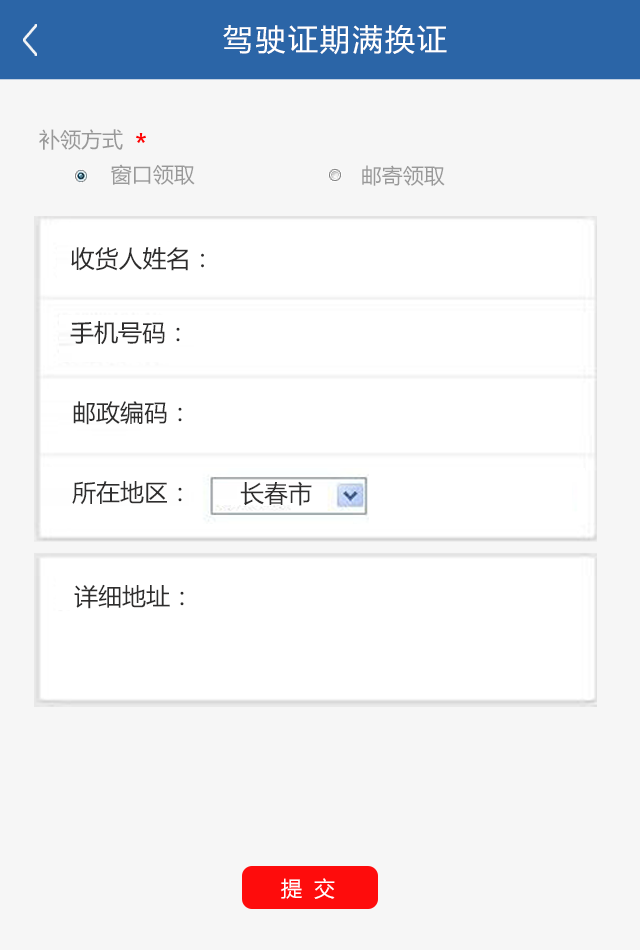
<style>
.page{position:relative;width:640px;height:950px;background:#f6f6f6}
.page>*{position:absolute;margin:0}
.t1{font:30px "MicrosoftYaHei";letter-spacing:0.08em;color:#ffffff}
.t2{font:21px "MicrosoftYaHei";color:#999999}
.t3{font:24px "MicrosoftYaHei";color:#2e2d2d}
.t4{font:21px "MicrosoftYaHei";letter-spacing:0.14em;color:#ffffff}
</style>
<div class="page">
<p class="t1" style="left:223px;top:25px;width:224px;height:30px">驾驶证期满换证</p>
<p class="t2" style="left:39px;top:129px;width:84px;height:21px">补领方式</p>
<p class="t2" style="left:111px;top:164px;width:84px;height:21px">窗口领取</p>
<p class="t2" style="left:362px;top:165px;width:83px;height:21px">邮寄领取</p>
<p class="t3" style="left:71px;top:247px;width:133px;height:24px">收货人姓名：</p>
<p class="t3" style="left:70px;top:321px;width:110px;height:24px">手机号码：</p>
<p class="t3" style="left:73px;top:401px;width:109px;height:24px">邮政编码：</p>
<p class="t3" style="left:72px;top:481px;width:110px;height:24px">所在地区：</p>
<p class="t3" style="left:240px;top:481px;width:72px;height:25px">长春市</p>
<p class="t3" style="left:74px;top:584px;width:110px;height:25px">详细地址：</p>
<p class="t4" style="left:281px;top:878px;width:54px;height:21px">提 交</p>
</div>
